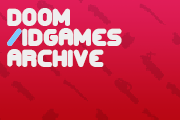
<style>
.page{position:relative;width:180px;height:120px}
.page>*{position:absolute;margin:0}
.t1{font:24.7px/20.6px "CorpulentCapsBRK";color:#eeeeee}
.t2{font:24.7px "CorpulentCapsBRK";color:#7ac8ff}
</style>
<div class="page">
<p class="t1" style="left:7px;top:8px;width:115px;height:59px">doom<br>/idgames<br>Archive</p>
<p class="t2" style="left:7px;top:28px;width:15px;height:18px">/</p>
</div>
